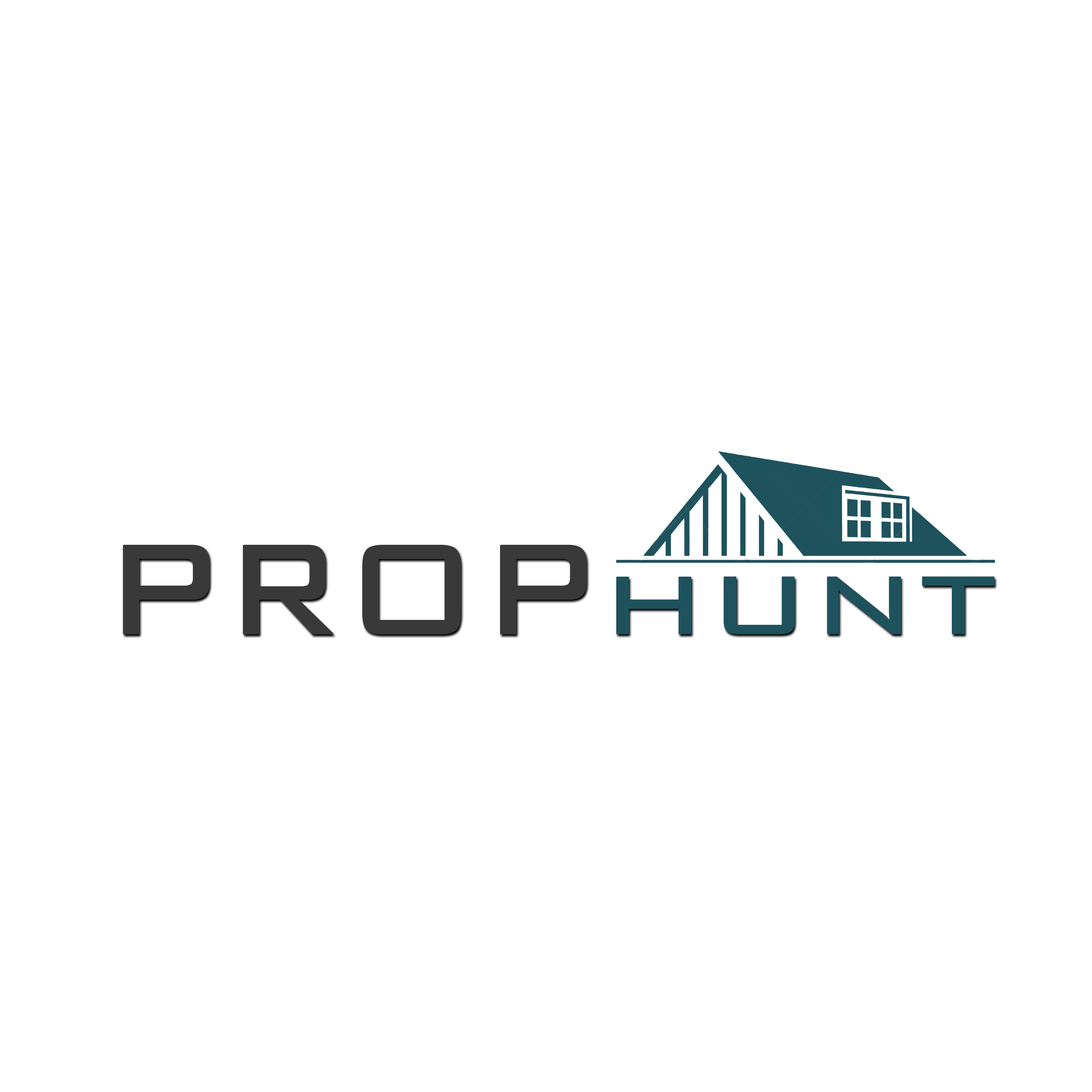
<style>
.page{position:relative;width:1092px;height:1092px;background:#ffffff}
.page>*{position:absolute;margin:0}
.t1{font:208.5px "BankGothicBT-Light";color:#393939;font-weight:bold;scale:0.91 1}
.t2{font:134.2px "BankGothicBT-Light";color:#1e525d;font-weight:bold;scale:1.11 1}
</style>
<div class="page">
<p class="t1" style="left:123px;top:545px;width:872px;height:90px">prop<span class="t2">hunt</span></p>
</div>
